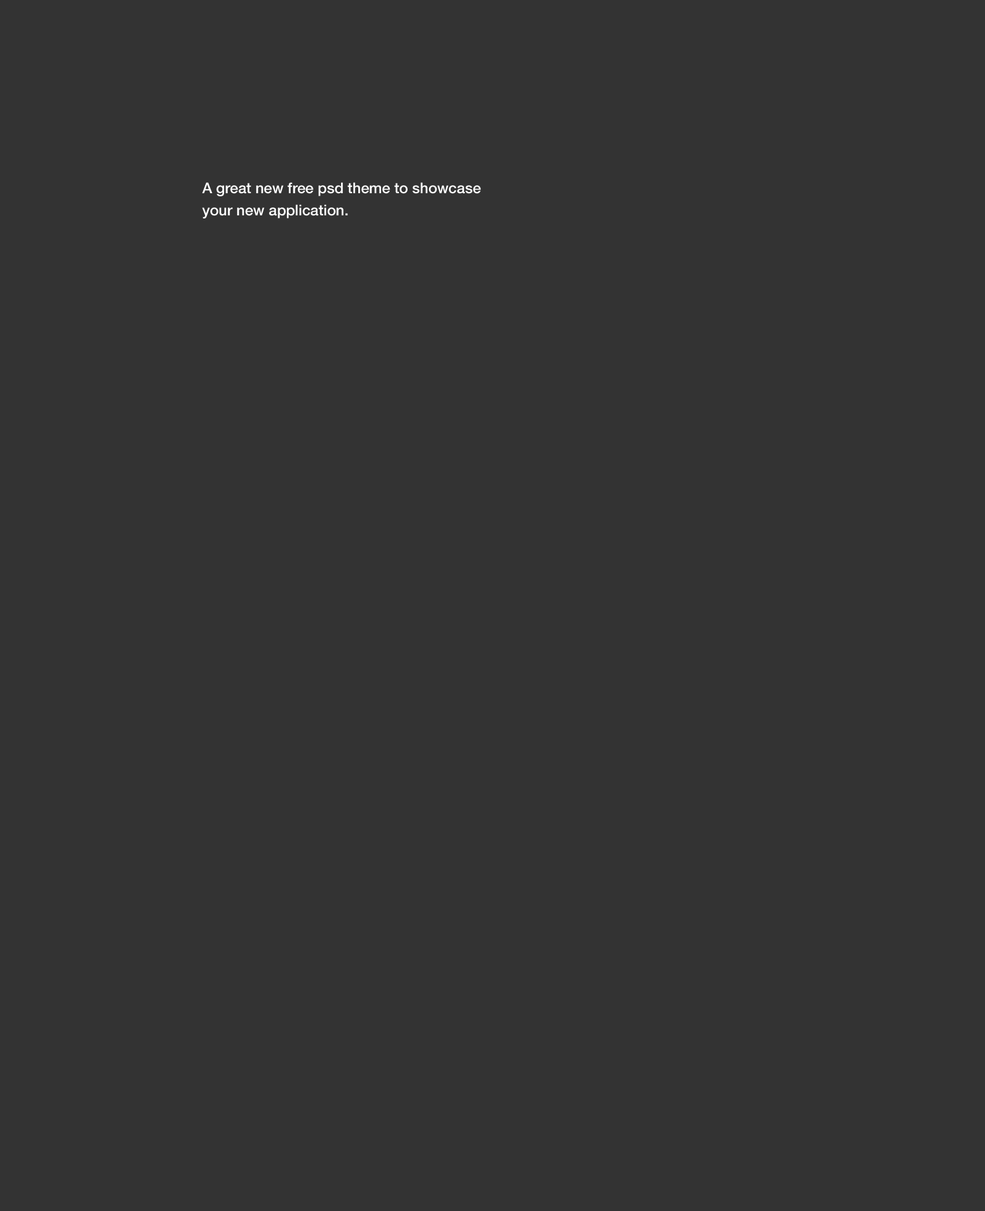
<style>
.page{position:relative;width:985px;height:1211px;background:#333333}
.page>*{position:absolute;margin:0}
.t1{font:14.8px/22.2px "HelveticaNeue-Medium";color:#ffffff}
</style>
<div class="page">
<p class="t1" style="left:202px;top:182px;width:279px;height:36px">A great new free psd theme to showcase your new application.</p>
</div>
